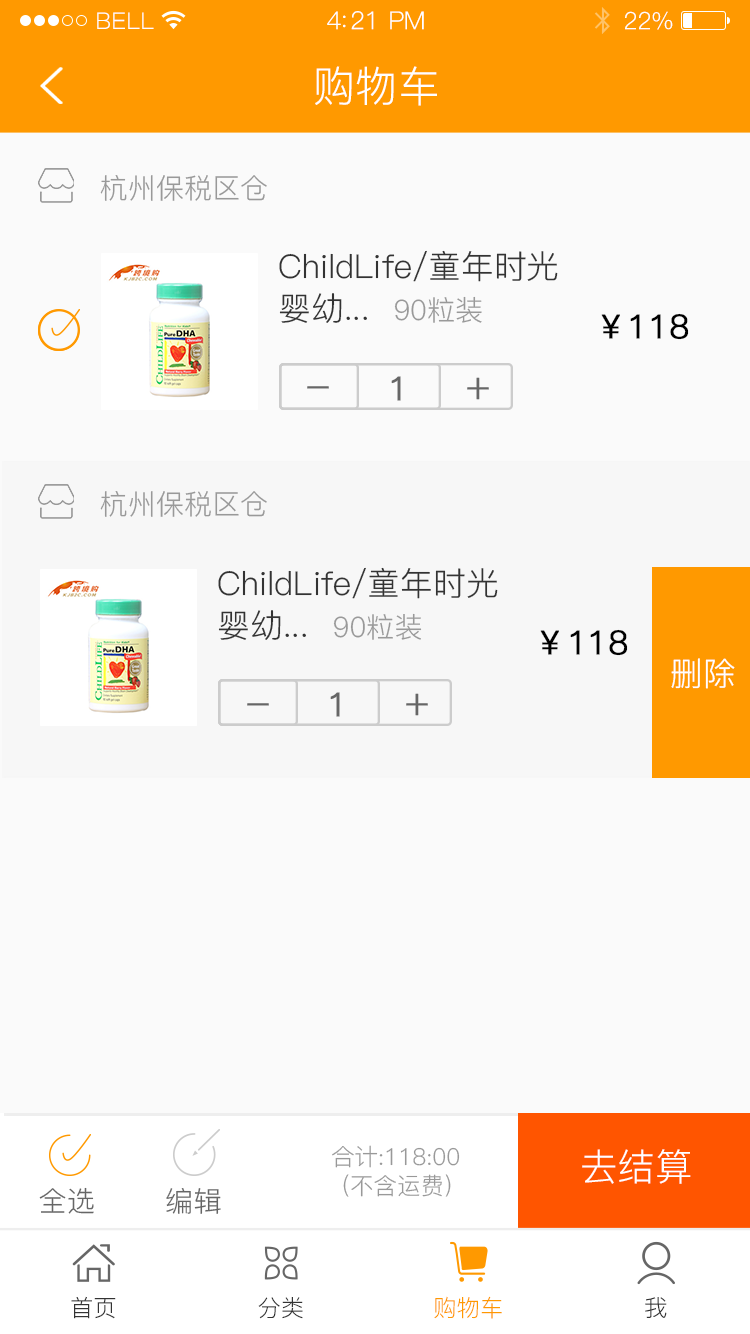
<style>
.page{position:relative;width:750px;height:1334px;background:#fafafa}
.page>*{position:absolute;margin:0}
.t1{font:23px "PingFang-SC-Regular";letter-spacing:0.02em;color:#ffffff}
.t2{font:25px "PingFang-SC-Regular";letter-spacing:-0.02em;color:#ffffff}
.t3{font:24px "PingFang-SC-Regular";letter-spacing:-0.02em;color:#ffffff}
.t4{font:42.2px "PingFang-SC-Regular";color:#ffffff}
.t5{font:28.1px "PingFang-SC-Regular";color:#999999}
.t6{font:32.8px/42.2px "PingFang-SC-Regular";color:#333333}
.t7{font:32.8px "PingFang-SC-Regular";color:#000000;font-weight:bold}
.t8{font:32.8px "PingFang-SC-Regular";color:#666666;font-weight:bold}
.t9{font:32.8px "PingFang-SC-Regular";color:#ffffff}
.t10{font:23.4px "PingFang-SC-Regular";color:#999999}
.t11{font:37.5px "PingFang-SC-Regular";color:#ffffff}
.t12{font:28.1px "PingFang-SC-Regular";color:#666666}
.t13{font:23.4px "PingFang-SC-Regular";color:#333333}
.t14{font:23.4px "PingFang-SC-Regular";color:#ff9900}
</style>
<div class="page">
<p class="t1" style="left:97px;top:12px;width:57px;height:17px">BELL</p>
<p class="t2" style="left:327px;top:11px;width:97px;height:19px">4:21 PM</p>
<p class="t3" style="left:625px;top:11px;width:48px;height:19px">22%</p>
<p class="t4" style="left:315px;top:66px;width:122px;height:40px">购物车</p>
<p class="t5" style="left:100px;top:175px;width:167px;height:26px">杭州保税区仓</p>
<p class="t6" style="left:279px;top:250px;width:279px;height:73px">ChildLife/童年时光<br>婴幼...</p>
<p class="t5" style="left:394px;top:296px;width:88px;height:27px">90粒装</p>
<p class="t7" style="left:601px;top:313px;width:88px;height:27px">￥118</p>
<p class="t8" style="left:391px;top:376px;width:10px;height:25px">1</p>
<p class="t8" style="left:467px;top:377px;width:22px;height:23px">＋</p>
<p class="t8" style="left:307px;top:386px;width:22px;height:3px">－</p>
<p class="t5" style="left:100px;top:491px;width:167px;height:26px">杭州保税区仓</p>
<p class="t6" style="left:218px;top:567px;width:280px;height:73px">ChildLife/童年时光<br>婴幼...</p>
<p class="t5" style="left:333px;top:613px;width:89px;height:27px">90粒装</p>
<p class="t7" style="left:540px;top:629px;width:88px;height:27px">￥118</p>
<p class="t9" style="left:671px;top:658px;width:64px;height:31px">删除</p>
<p class="t8" style="left:330px;top:692px;width:10px;height:25px">1</p>
<p class="t8" style="left:406px;top:693px;width:22px;height:23px">＋</p>
<p class="t8" style="left:247px;top:703px;width:22px;height:3px">－</p>
<p class="t10" style="left:332px;top:1145px;width:128px;height:23px">合计:118:00</p>
<p class="t11" style="left:582px;top:1149px;width:109px;height:35px">去结算</p>
<p class="t10" style="left:343px;top:1174px;width:108px;height:23px">(不含运费）</p>
<p class="t12" style="left:39px;top:1187px;width:55px;height:27px">全选</p>
<p class="t12" style="left:166px;top:1188px;width:55px;height:26px">编辑</p>
<p class="t13" style="left:71px;top:1296px;width:45px;height:23px">首页</p>
<p class="t13" style="left:258px;top:1297px;width:45px;height:22px">分类</p>
<p class="t14" style="left:434px;top:1296px;width:68px;height:23px">购物车</p>
<p class="t13" style="left:645px;top:1297px;width:22px;height:21px">我</p>
</div>
